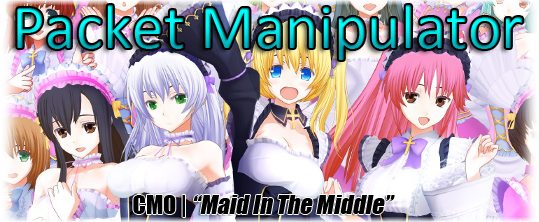
<style>
.page{position:relative;width:539px;height:222px}
.page>*{position:absolute;margin:0}
.t1{font:64px "Calibri"}
.t2{font:24px "Impact";color:#000000;font-style:italic}
.t3{font:24px "Impact";color:#000000}
</style>
<div class="page">
<p class="t1" style="left:17px;top:5px;width:506px;height:55px">Packet Manipulator</p>
<p class="t2" style="left:133px;top:195px;width:262px;height:22px"><span class="t3">CMO | </span>“Maid In The Middle”</p>
</div>
